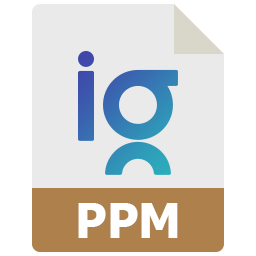
<style>
.page{position:relative;width:256px;height:256px;background:#eaeaea}
.page>*{position:absolute;margin:0}
.t1{font:48px "Tahoma-Bold";color:#ffffff}
</style>
<div class="page">
<p class="t1" style="left:78px;top:203px;width:100px;height:35px">PPM</p>
</div>
